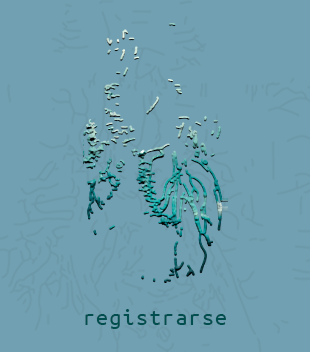
<style>
.page{position:relative;width:310px;height:352px;background:#71a0b2}
.page>*{position:absolute;margin:0}
.t1{font:24px "UbuntuMono-Regular";letter-spacing:0.05em;color:#004e4d}
</style>
<div class="page">
<p class="t1" style="left:85px;top:309px;width:141px;height:20px">registrarse</p>
</div>
